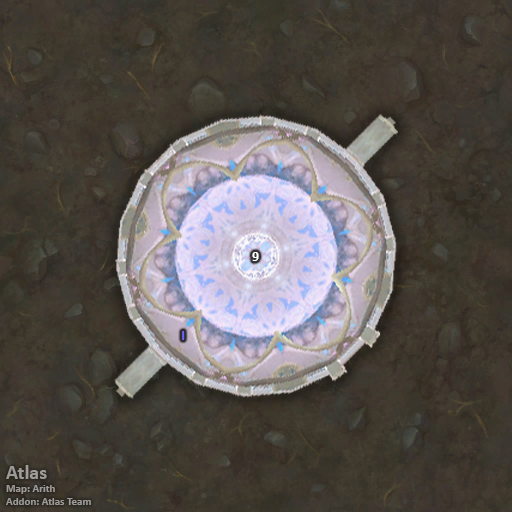
<style>
.page{position:relative;width:512px;height:512px}
.page>*{position:absolute;margin:0}
.t1{font:14px "Calibri-Bold";color:#ffffff}
.t2{font:14px "Calibri-Bold";color:#6666ff}
.t3{font:11px "Calibri-Bold";color:#9d9b98}
.t4{font:20px "Calibri-Bold";color:#9d9b98}
</style>
<div class="page">
<p class="t1" style="left:252px;top:252px;width:7px;height:9px">9</p>
<p class="t2" style="left:182px;top:331px;width:3px;height:9px">I</p>
<p class="t3" style="left:6px;top:465px;width:85px;height:40px"><span class="t4">Atlas<br></span>Map: Arith<br>Addon: Atlas Team</p>
</div>
